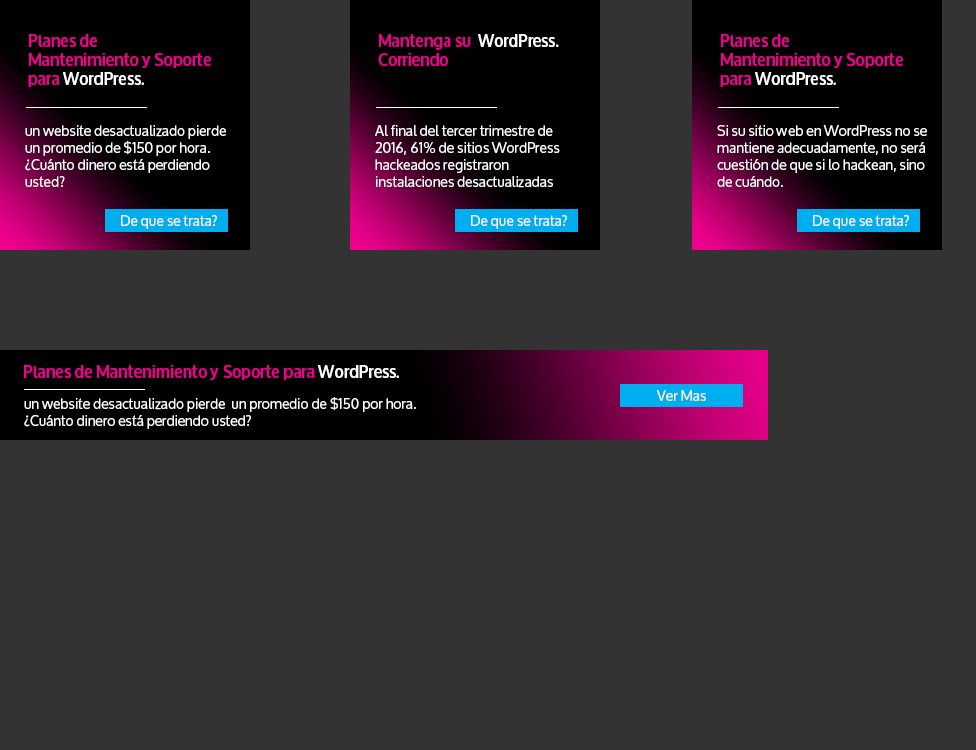
<style>
.page{position:relative;width:976px;height:750px;background:#333333}
.page>*{position:absolute;margin:0}
.t1{font:16px "Oxygen-Bold";color:#ec008c}
.t2{font:16px "Oxygen-Bold";color:#ffffff}
.t3{font:14px "Oxygen";color:#ffffff}
</style>
<div class="page">
<p class="t1" style="left:28px;top:34px;width:183px;height:53px">Planes de <br>Mantenimiento y Soporte para <span class="t2">WordPress.</span></p>
<p class="t1" style="left:378px;top:34px;width:181px;height:32px">Mantenga su  <span class="t2">WordPress.<br></span>Corriendo</p>
<p class="t1" style="left:720px;top:34px;width:183px;height:53px">Planes de <br>Mantenimiento y Soporte para <span class="t2">WordPress.</span></p>
<p class="t3" style="left:25px;top:125px;width:201px;height:62px">un website desactualizado pierde  un promedio de $150 por hora.<br>¿Cuánto dinero está perdiendo usted?</p>
<p class="t3" style="left:375px;top:125px;width:185px;height:63px">Al final del tercer trimestre de 2016, 61% de sitios WordPress hackeados registraron instalaciones desactualizadas</p>
<p class="t3" style="left:717px;top:125px;width:210px;height:62px">Si su sitio web en WordPress no se mantiene adecuadamente, no será cuestión de que si lo hackean, sino de cuándo.</p>
<p class="t3" style="left:121px;top:215px;width:96px;height:14px">De que se trata?</p>
<p class="t3" style="left:471px;top:215px;width:96px;height:14px">De que se trata?</p>
<p class="t3" style="left:813px;top:215px;width:96px;height:14px">De que se trata?</p>
<p class="t1" style="left:24px;top:365px;width:375px;height:15px">Planes de Mantenimiento y Soporte para <span class="t2">WordPress.</span></p>
<p class="t3" style="left:656px;top:390px;width:50px;height:11px">Ver Mas</p>
<p class="t3" style="left:24px;top:397px;width:392px;height:32px">un website desactualizado pierde  un promedio de $150 por hora.<br>¿Cuánto dinero está perdiendo usted?</p>
</div>
